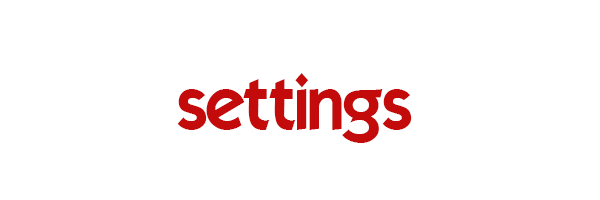
<style>
.page{position:relative;width:600px;height:200px;background:#ffffff}
.page>*{position:absolute;margin:0}
.t1{font:72px "ELEGANCE";color:#c30b0b}
</style>
<div class="page">
<p class="t1" style="left:177px;top:73px;width:235px;height:70px">settings</p>
</div>
